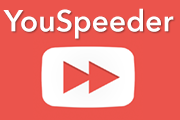
<style>
.page{position:relative;width:180px;height:120px;background:#eb544c}
.page>*{position:absolute;margin:0}
.t1{font:30px "AvenirNext-DemiBold";color:#ffffff}
</style>
<div class="page">
<p class="t1" style="left:3px;top:8px;width:171px;height:31px">YouSpeeder</p>
</div>
